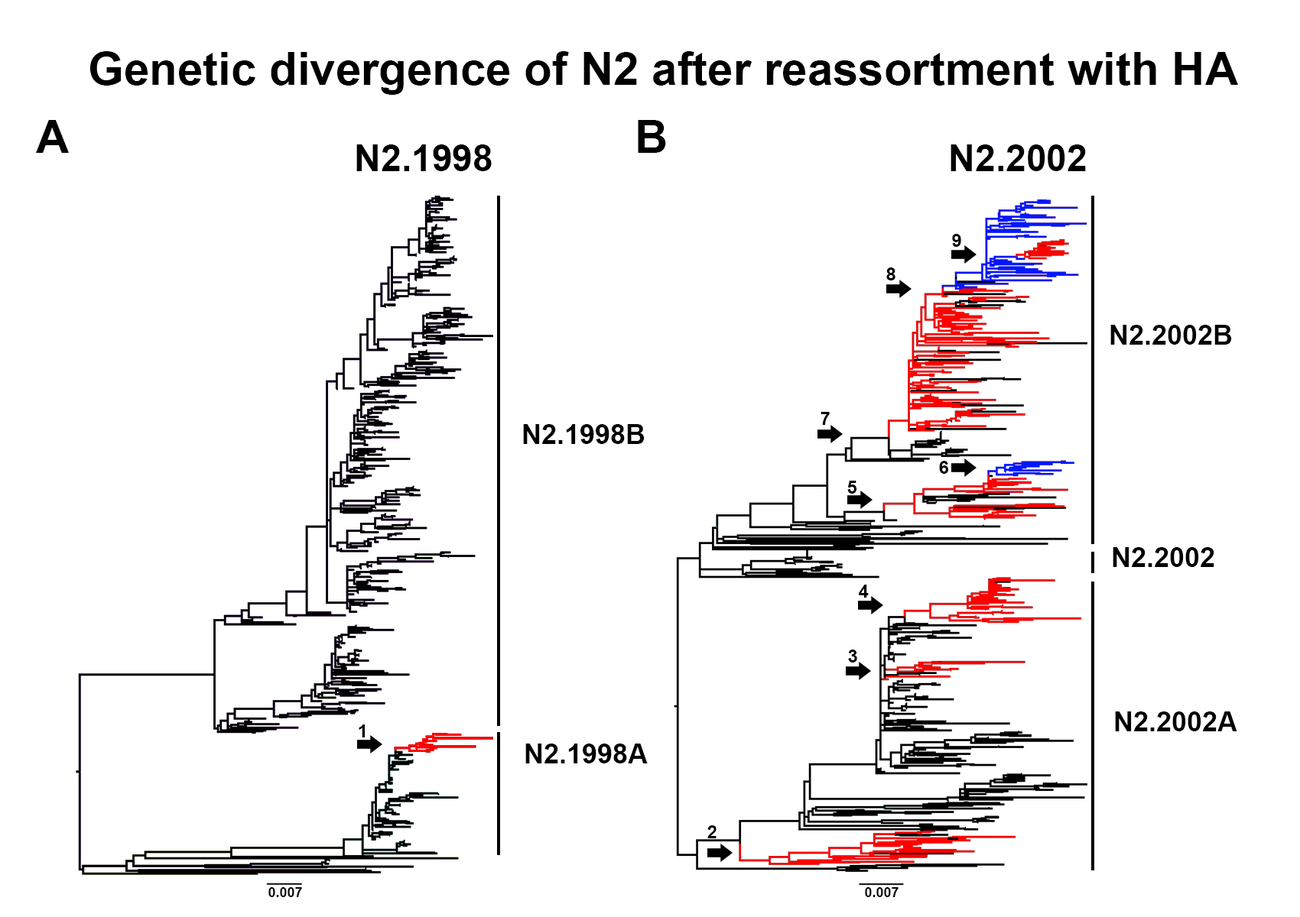
<style>
.page{position:relative;width:1300px;height:917px;background:#ffffff}
.page>*{position:absolute;margin:0}
.t1{font:45.9px "Arial-BoldMT";color:#000000}
.t2{font:36.7px "Arial-BoldMT";color:#000000}
.t3{font:18.3px "Arial-BoldMT";color:#000000}
.t4{font:27.5px "Arial-BoldMT";color:#000000}
.t5{font:13.8px "Arial-BoldMT";color:#000000}
</style>
<div class="page">
<p class="t1" style="left:89px;top:51px;width:1149px;height:44px">Genetic divergence of N2 after reassortment with HA</p>
<p class="t1" style="left:36px;top:120px;width:33px;height:33px">A</p>
<p class="t1" style="left:638px;top:120px;width:28px;height:33px">B</p>
<p class="t2" style="left:356px;top:144px;width:136px;height:27px">N2.1998</p>
<p class="t2" style="left:950px;top:144px;width:136px;height:27px">N2.2002</p>
<p class="t3" style="left:952px;top:234px;width:9px;height:13px">9</p>
<p class="t3" style="left:886px;top:268px;width:9px;height:13px">8</p>
<p class="t4" style="left:1110px;top:325px;width:122px;height:20px">N2.2002B</p>
<p class="t3" style="left:820px;top:412px;width:10px;height:13px">7</p>
<p class="t4" style="left:523px;top:424px;width:122px;height:20px">N2.1998B</p>
<p class="t3" style="left:939px;top:461px;width:9px;height:13px">6</p>
<p class="t3" style="left:847px;top:481px;width:10px;height:13px">5</p>
<p class="t4" style="left:1112px;top:547px;width:102px;height:20px">N2.2002</p>
<p class="t3" style="left:859px;top:585px;width:10px;height:13px">4</p>
<p class="t3" style="left:848px;top:650px;width:9px;height:13px">3</p>
<p class="t4" style="left:1115px;top:712px;width:122px;height:20px">N2.2002A</p>
<p class="t3" style="left:359px;top:725px;width:6px;height:13px">1</p>
<p class="t4" style="left:525px;top:744px;width:123px;height:20px">N2.1998A</p>
<p class="t3" style="left:707px;top:826px;width:9px;height:13px">2</p>
<p class="t5" style="left:268px;top:888px;width:34px;height:10px">0.007</p>
<p class="t5" style="left:865px;top:888px;width:33px;height:10px">0.007</p>
</div>
